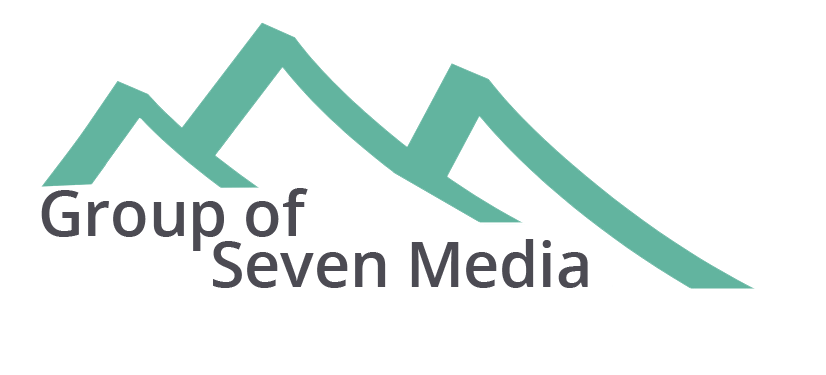
<style>
.page{position:relative;width:826px;height:375px;background:#ffffff}
.page>*{position:absolute;margin:0}
.t1{font:62.5px "OpenSans-Semibold";color:#4c4b53}
</style>
<div class="page">
<p class="t1" style="left:41px;top:188px;width:267px;height:63px">Group of</p>
<p class="t1" style="left:213px;top:239px;width:375px;height:49px">Seven Media</p>
</div>
